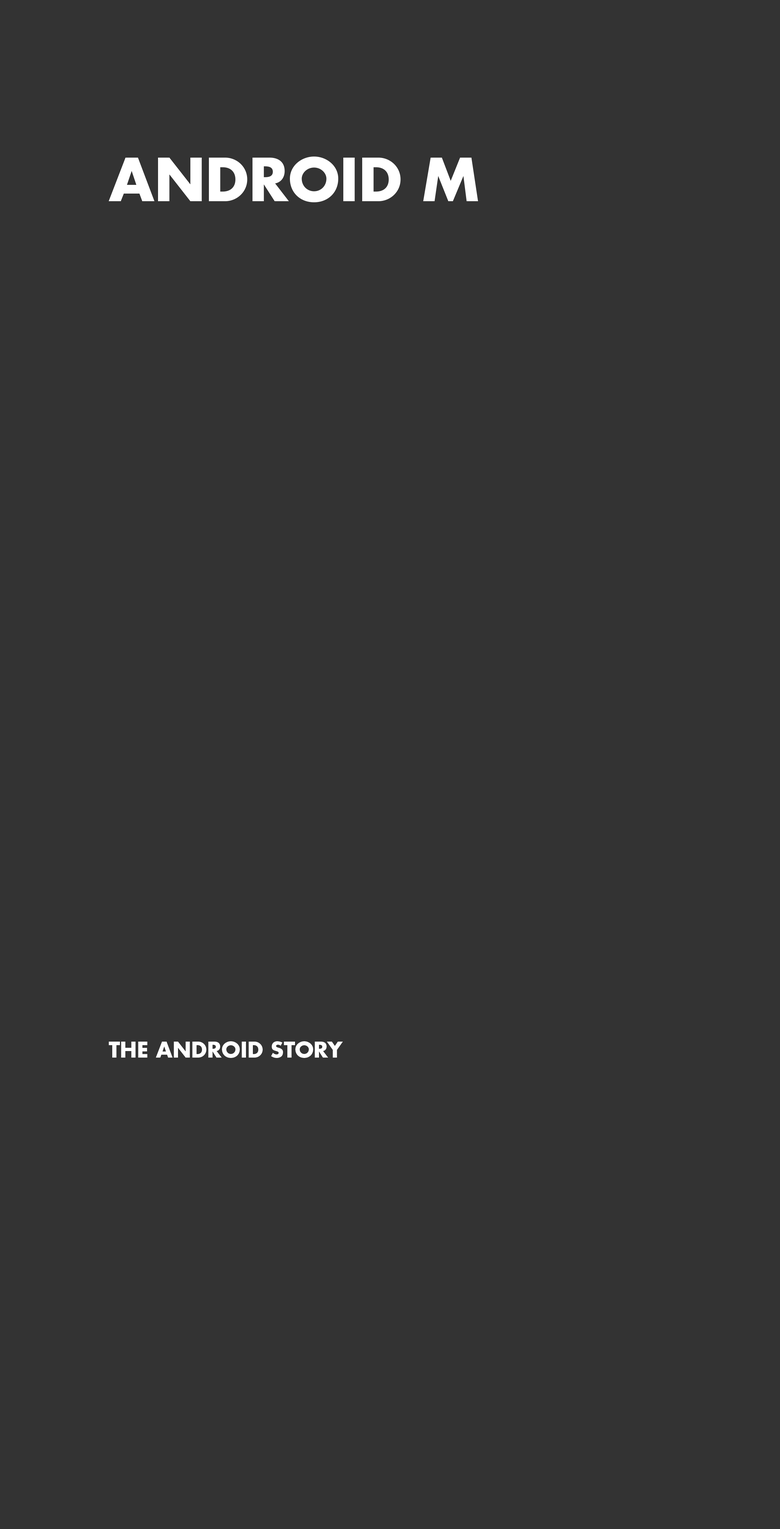
<style>
.page{position:relative;width:780px;height:1529px;background:#333333}
.page>*{position:absolute;margin:0}
.t1{font:57.9px "FuturaStd-Bold";color:#ffffff}
.t2{font:21.2px "FuturaStd-Bold";color:#ffffff;text-transform:uppercase}
</style>
<div class="page">
<p class="t1" style="left:109px;top:157px;width:369px;height:45px">ANDROID M</p>
<p class="t2" style="left:109px;top:1041px;width:234px;height:17px">THE ANDROID STORY</p>
</div>
